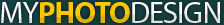
<style>
.page{position:relative;width:224px;height:25px}
.page>*{position:absolute;margin:0}
.t1{font:30px "MyriadPro-Regular";letter-spacing:-0.025em;color:#fffafa;text-transform:uppercase}
.t2{font:30px "MyriadPro-Bold";letter-spacing:-0.025em;color:#ffc600;text-transform:uppercase}
</style>
<div class="page">
<p class="t1" style="left:1px;top:2px;width:219px;height:21px">my<span class="t2">photo</span>design</p>
</div>
